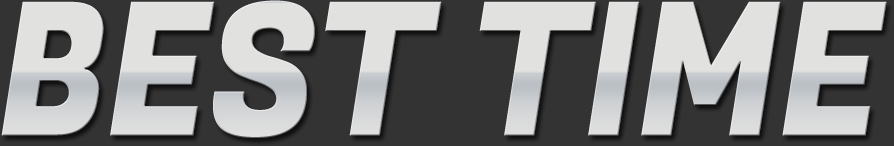
<style>
.page{position:relative;width:894px;height:146px;background:#333333}
.page>*{position:absolute;margin:0}
.t1{font:185.2px "FugazOne-Regular";color:#dfdfdf;scale:0.89 1}
</style>
<div class="page">
<p class="t1" style="left:1px;top:0px;width:886px;height:138px">BEST TIME</p>
</div>
